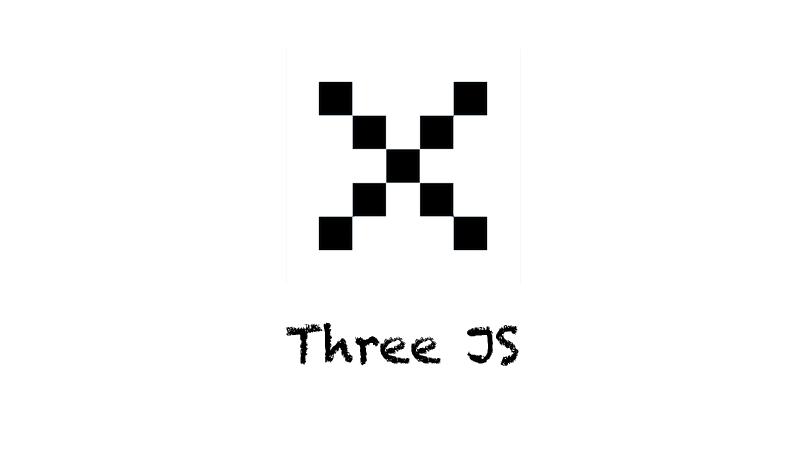
<style>
.page{position:relative;width:800px;height:450px;background:#ffffff}
.page>*{position:absolute;margin:0}
.t1{font:50px "Chalkduster";color:#000000}
</style>
<div class="page">
<p class="t1" style="left:286px;top:322px;width:233px;height:44px">Three JS</p>
</div>
